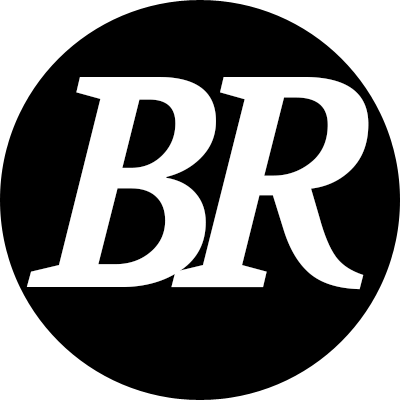
<style>
.page{position:relative;width:400px;height:400px;background:#000000}
.page>*{position:absolute;margin:0}
.t1{font:300px "Volkhov-BoldItalic";color:#ffffff}
</style>
<div class="page">
<p class="t1" style="left:26px;top:77px;width:190px;height:210px">B</p>
<p class="t1" style="left:171px;top:77px;width:198px;height:213px">R</p>
</div>
